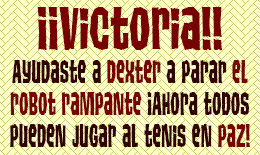
<style>
.page{position:relative;width:260px;height:155px;background:#ffffcc}
.page>*{position:absolute;margin:0}
.t1{font:59.7px "TikiIsland";color:#770000;scale:0.84 1}
.t2{font:31.6px/32px "TikiIsland";color:#330000;scale:0.7 1}
.t3{font:31.6px/32px "TikiIsland";color:#770000;scale:0.7 1}
</style>
<div class="page">
<p class="t1" style="left:37px;top:7px;width:185px;height:43px">¡¡Victoria!!</p>
<p class="t2" style="left:10px;top:60px;width:240px;height:87px;text-align:center">Ayudaste a <span class="t3">Dexter </span>a parar <span class="t3">el<br>robot rampante </span>¡Ahora todos<br>pueden jugar al tenis en <span class="t3">paz!</span></p>
</div>
